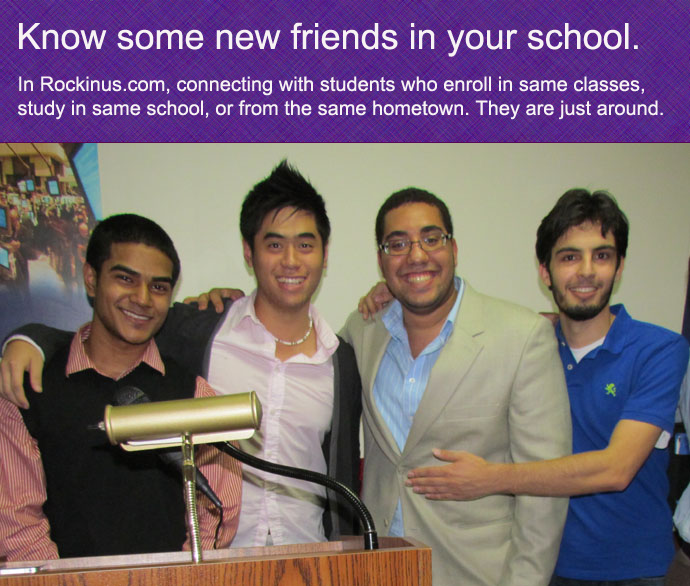
<style>
.page{position:relative;width:690px;height:586px}
.page>*{position:absolute;margin:0}
.t1{font:36px "ArialMT";color:#f7f3f3}
.t2{font:20px "ArialMT";color:#f7f3f3}
</style>
<div class="page">
<p class="t1" style="left:19px;top:22px;width:619px;height:35px">Know some new friends in your school.</p>
<p class="t2" style="left:18px;top:76px;width:645px;height:44px">In Rockinus.com, connecting with students who enroll in same classes, <br>study in same school, or from the same hometown. They are just around.</p>
</div>
